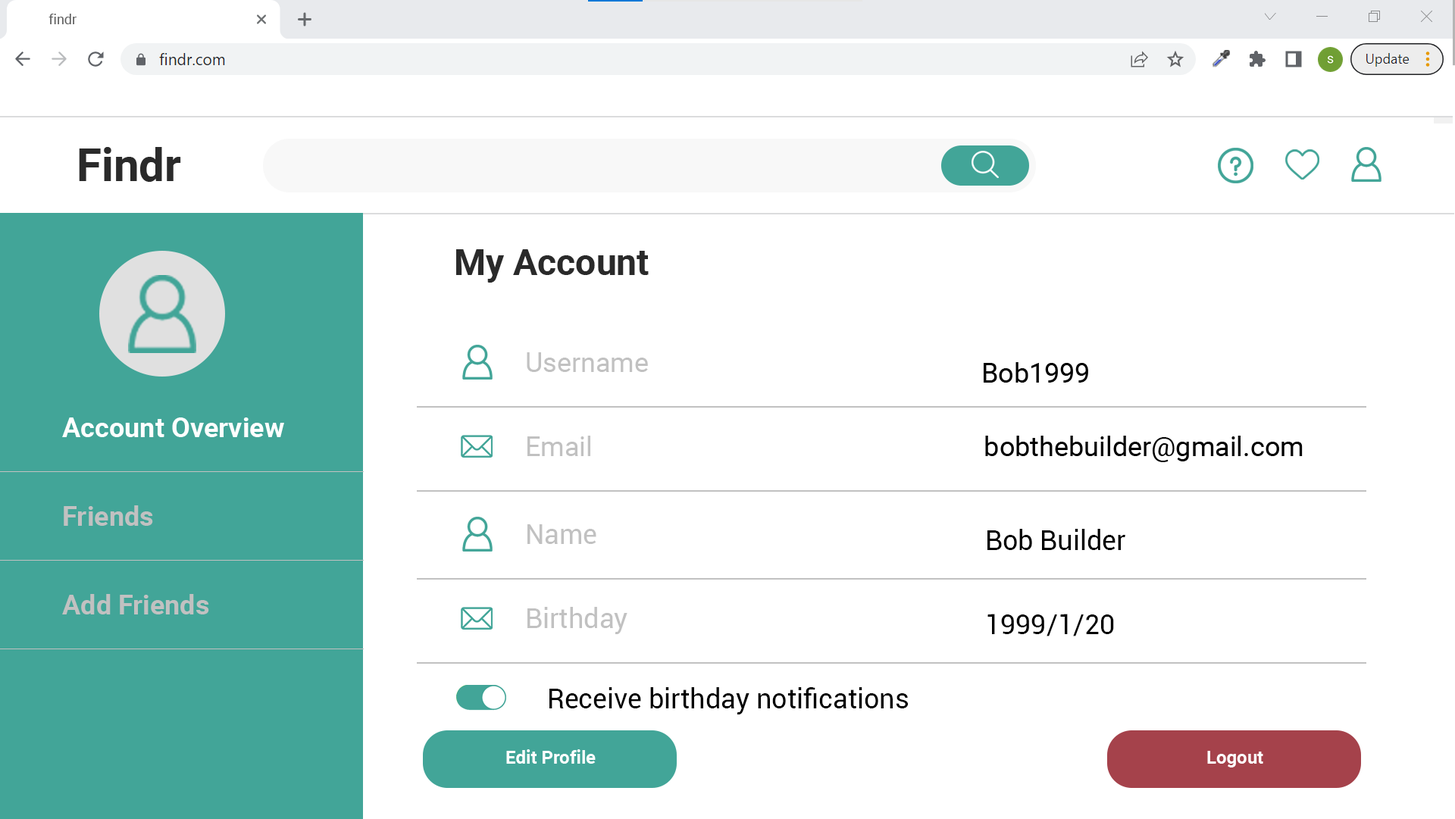
<style>
.page{position:relative;width:1455px;height:819px;background:#ffffff}
.page>*{position:absolute;margin:0}
.t1{font:13.6px "Roboto-Regular";color:#5f5f5f}
.t2{font:45.5px "Roboto-Bold";color:#2a2a2a}
.t3{font:36.4px "Roboto-Bold";color:#2a2a2a}
.t4{font:27.3px "Roboto-Regular";color:#c1c1c1}
.t5{font:27.3px "Roboto-Regular";color:#000000}
.t6{font:27.3px "Roboto-Bold";color:#ffffff}
.t7{font:27.3px "Roboto-Bold";color:#c1c1c1}
.t8{font:18.2px "Roboto-Bold";color:#ffffff}
</style>
<div class="page">
<p class="t1" style="left:49px;top:14px;width:28px;height:10px">findr</p>
<p class="t2" style="left:79px;top:147px;width:102px;height:35px">Findr</p>
<p class="t3" style="left:456px;top:249px;width:193px;height:34px">My Account</p>
<p class="t4" style="left:527px;top:352px;width:121px;height:20px">Username</p>
<p class="t5" style="left:984px;top:362px;width:104px;height:21px">Bob1999</p>
<p class="t6" style="left:62px;top:418px;width:222px;height:19px">Account Overview</p>
<p class="t4" style="left:528px;top:436px;width:62px;height:20px">Email</p>
<p class="t5" style="left:985px;top:436px;width:318px;height:26px">bobthebuilder@gmail.com</p>
<p class="t7" style="left:64px;top:506px;width:89px;height:20px">Friends</p>
<p class="t4" style="left:528px;top:525px;width:69px;height:19px">Name</p>
<p class="t5" style="left:988px;top:529px;width:138px;height:21px">Bob Builder</p>
<p class="t7" style="left:62px;top:594px;width:147px;height:21px">Add Friends</p>
<p class="t4" style="left:528px;top:607px;width:100px;height:27px">Birthday</p>
<p class="t5" style="left:988px;top:614px;width:126px;height:23px">1999/1/20</p>
<p class="t5" style="left:550px;top:687px;width:358px;height:28px">Receive birthday notifications</p>
<p class="t8" style="left:506px;top:750px;width:90px;height:14px">Edit Profile</p>
<p class="t8" style="left:1207px;top:751px;width:57px;height:17px">Logout</p>
</div>
